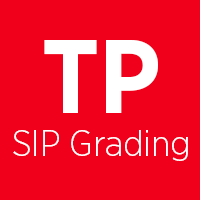
<style>
.page{position:relative;width:200px;height:200px;background:#f1001c}
.page>*{position:absolute;margin:0}
.t1{font:36px "GothamNarrow-Light";color:#ffffff}
.t2{font:105px "GothamNarrow-Bold";color:#ffffff}
</style>
<div class="page">
<p class="t1" style="left:13px;top:40px;width:175px;height:121px;text-align:center"><span class="t2">TP<br></span>SIP Grading</p>
</div>
